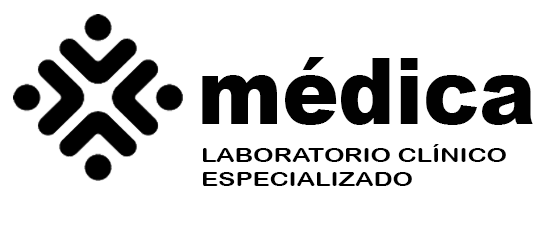
<style>
.page{position:relative;width:550px;height:230px;background:#ffffff}
.page>*{position:absolute;margin:0}
.t1{font:91.9px "Arial-Black";color:#010101;scale:0.92 1}
.t2{font:20.1px "ArialRoundedMTBold";color:#000000;scale:1.27 1}
</style>
<div class="page">
<p class="t1" style="left:202px;top:57px;width:331px;height:68px">médica</p>
<p class="t2" style="left:203px;top:144px;width:303px;height:42px">LABORATORIO CLÍNICO <br>ESPECIALIZADO</p>
</div>
